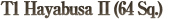
<style>
.page{position:relative;width:181px;height:19px;background:#ffffff}
.page>*{position:absolute;margin:0}
.t1{font:18px "RyuminPro-ExBold";letter-spacing:-0.08em;color:#4a3f32;font-weight:bold;scale:0.9 1}
</style>
<div class="page">
<p class="t1" style="left:0px;top:1px;width:163px;height:18px">T1 Hayabusa II (64 Sq.)</p>
</div>
